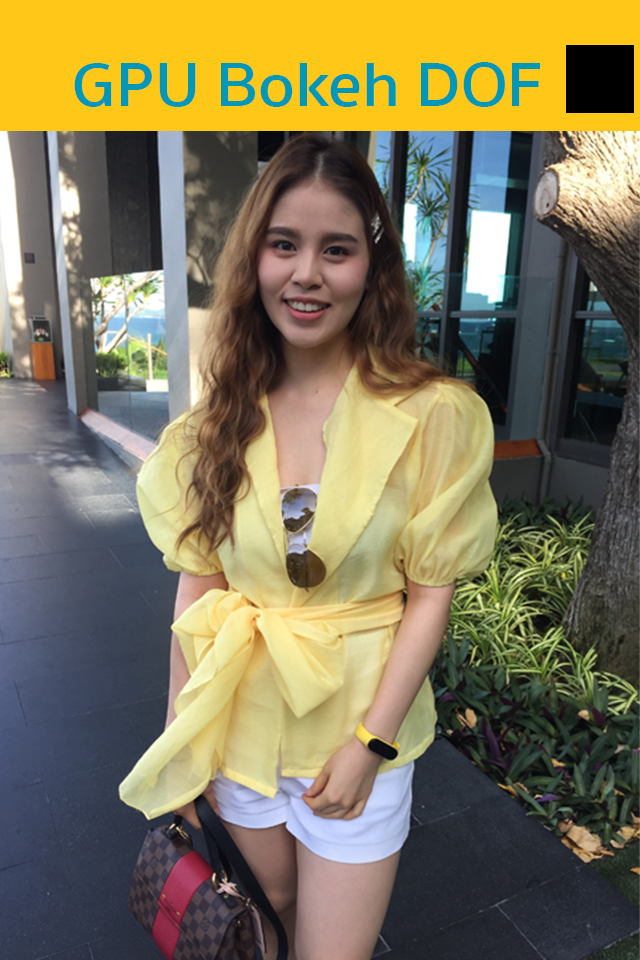
<style>
.page{position:relative;width:640px;height:960px}
.page>*{position:absolute;margin:0}
.t1{font:63.9px "SukhumvitSet-SemiBold";color:#0097b8;scale:1.05 1}
</style>
<div class="page">
<p class="t1" style="left:74px;top:62px;width:466px;height:45px">GPU Bokeh DOF</p>
</div>
